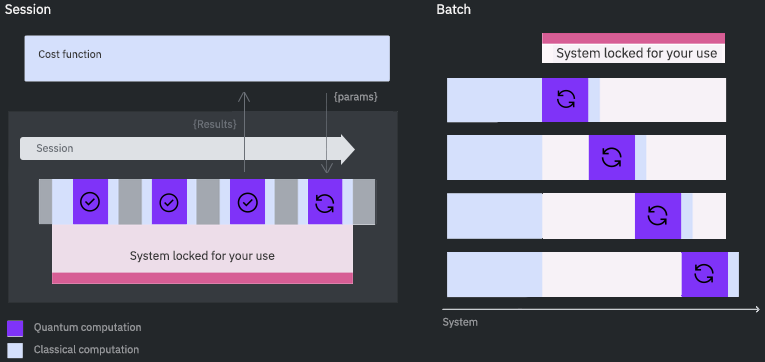
<style>
.page{position:relative;width:765px;height:362px;background:#23272a}
.page>*{position:absolute;margin:0}
.t1{font:13.3px "IBMPlexSans-Regular";color:#f4f4f4}
.t2{font:10.7px "IBMPlexSans-Regular";color:#393939}
.t3{font:13.3px "IBMPlexSans-Regular";color:#393939}
.t4{font:10.7px "IBMPlexSans-Regular";color:#949699}
.t5{font:10.7px "IBMPlexSans-Regular";color:#6b7077}
.t6{font:12px "IBMPlexSans-Regular";color:#393939}
</style>
<div class="page">
<p class="t1" style="left:5px;top:3px;width:46px;height:11px">Session</p>
<p class="t1" style="left:437px;top:3px;width:34px;height:11px">Batch</p>
<p class="t2" style="left:38px;top:49px;width:63px;height:9px">Cost function</p>
<p class="t3" style="left:556px;top:47px;width:161px;height:14px">System locked for your use</p>
<p class="t4" style="left:334px;top:92px;width:44px;height:11px">{params}</p>
<p class="t5" style="left:193px;top:119px;width:44px;height:11px">{Results}</p>
<p class="t5" style="left:36px;top:143px;width:37px;height:9px">Session</p>
<p class="t6" style="left:130px;top:250px;width:145px;height:13px">System locked for your use</p>
<p class="t4" style="left:443px;top:317px;width:35px;height:11px">System</p>
<p class="t4" style="left:34px;top:322px;width:107px;height:11px">Quantum computation</p>
<p class="t4" style="left:34px;top:345px;width:105px;height:11px">Classical computation</p>
</div>
